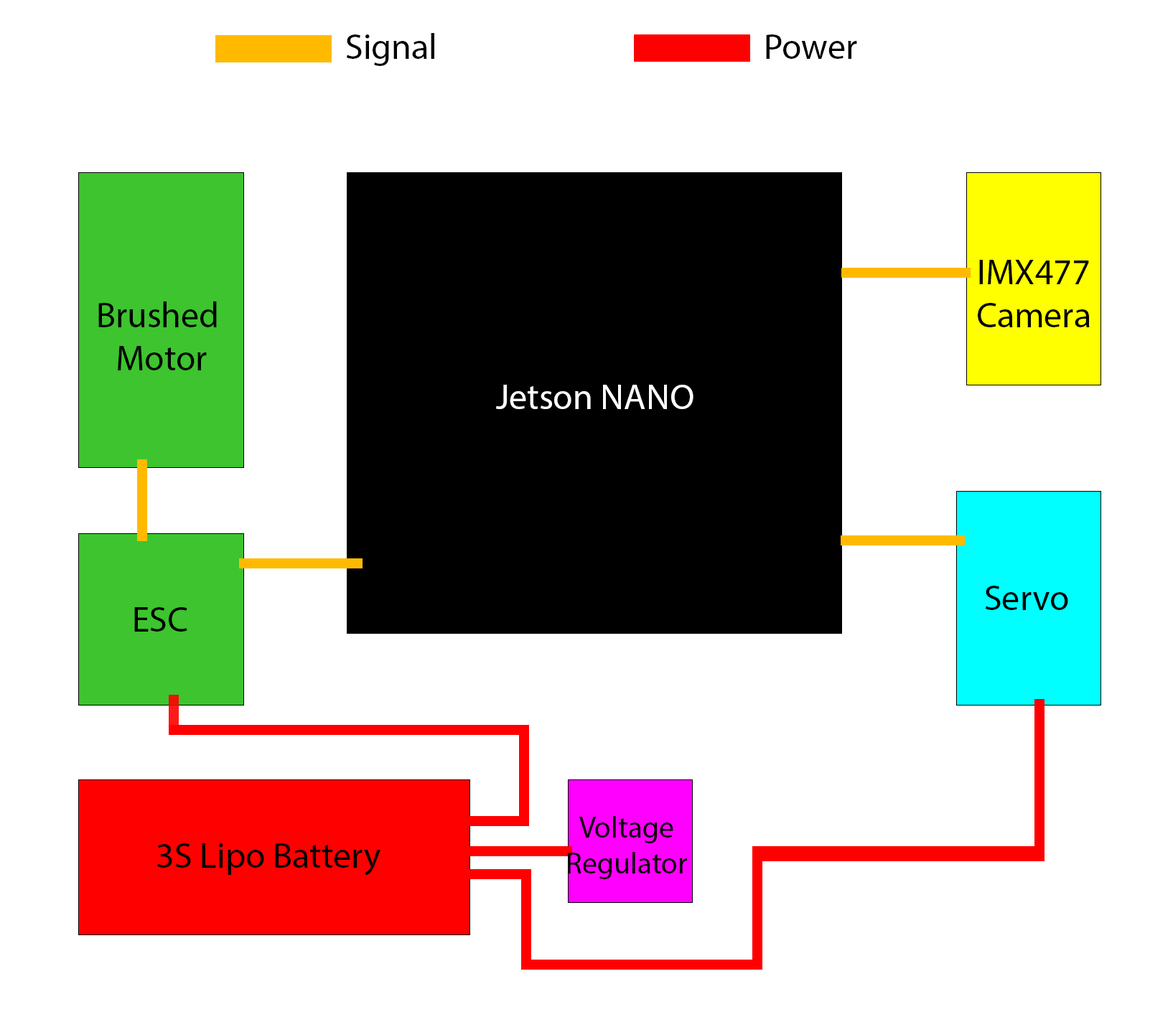
<style>
.page{position:relative;width:1173px;height:1017px;background:#ffffff}
.page>*{position:absolute;margin:0}
.t1{font:35.9px "MyriadPro-Regular";color:#000000}
.t2{font:35.9px "MyriadPro-Regular";color:#ffffff}
.t3{font:29.9px "MyriadPro-Regular";color:#000000}
</style>
<div class="page">
<p class="t1" style="left:346px;top:33px;width:88px;height:33px">Signal</p>
<p class="t1" style="left:766px;top:34px;width:91px;height:25px">Power</p>
<p class="t1" style="left:977px;top:260px;width:112px;height:67px;text-align:center">IMX477<br>Camera</p>
<p class="t1" style="left:98px;top:301px;width:119px;height:69px;text-align:center">Brushed <br>Motor</p>
<p class="t2" style="left:496px;top:385px;width:197px;height:24px">Jetson NANO</p>
<p class="t1" style="left:985px;top:586px;width:83px;height:24px">Servo</p>
<p class="t1" style="left:134px;top:607px;width:53px;height:25px">ESC</p>
<p class="t3" style="left:568px;top:816px;width:119px;height:63px;text-align:center">Voltage<br>Regulator</p>
<p class="t1" style="left:157px;top:843px;width:223px;height:33px">3S Lipo Battery</p>
</div>
